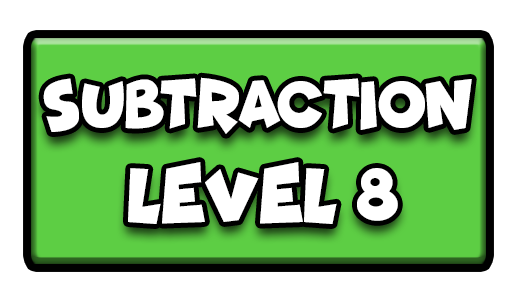
<style>
.page{position:relative;width:517px;height:301px;background:#ffffff}
.page>*{position:absolute;margin:0}
.t1{font:68.8px "Funhouse";color:#ffffff;scale:0.85 1}
.t2{font:77.7px "Funhouse";color:#ffffff;scale:0.95 1}
</style>
<div class="page">
<p class="t1" style="left:43px;top:77px;width:429px;height:57px">SUBTRACTION</p>
<p class="t2" style="left:128px;top:162px;width:270px;height:62px">LEVEL 8</p>
</div>
